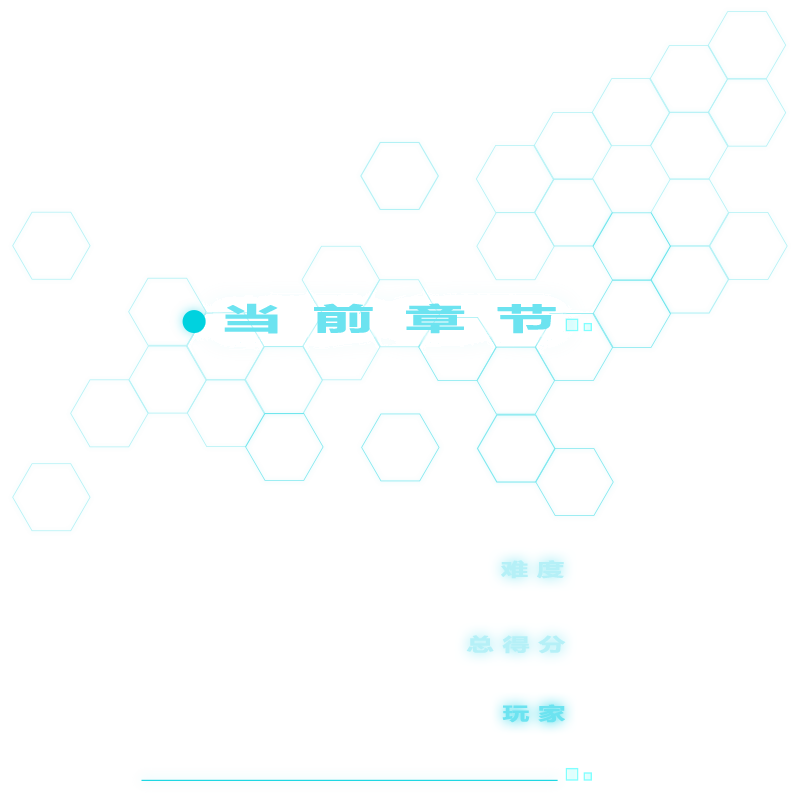
<style>
.page{position:relative;width:800px;height:800px;background:#ffffff}
.page>*{position:absolute;margin:0}
.t1{font:30px "MicrosoftYaHei-Bold";letter-spacing:0.5em;color:#6ce3f0;font-weight:bold;scale:2 1}
.t2{font:18px "MicrosoftYaHei-Bold";letter-spacing:0.3em;color:#b5f0f7;font-weight:bold;scale:1.5 1}
.t3{font:18px "MicrosoftYaHei-Bold";letter-spacing:0.3em;color:#6ce3f0;font-weight:bold;scale:1.5 1}
</style>
<div class="page">
<p class="t1" style="left:224px;top:303px;width:332px;height:31px">当前章节</p>
<p class="t2" style="left:501px;top:560px;width:63px;height:19px">难度</p>
<p class="t2" style="left:466px;top:635px;width:100px;height:19px">总得分</p>
<p class="t3" style="left:502px;top:704px;width:63px;height:19px">玩家</p>
</div>
